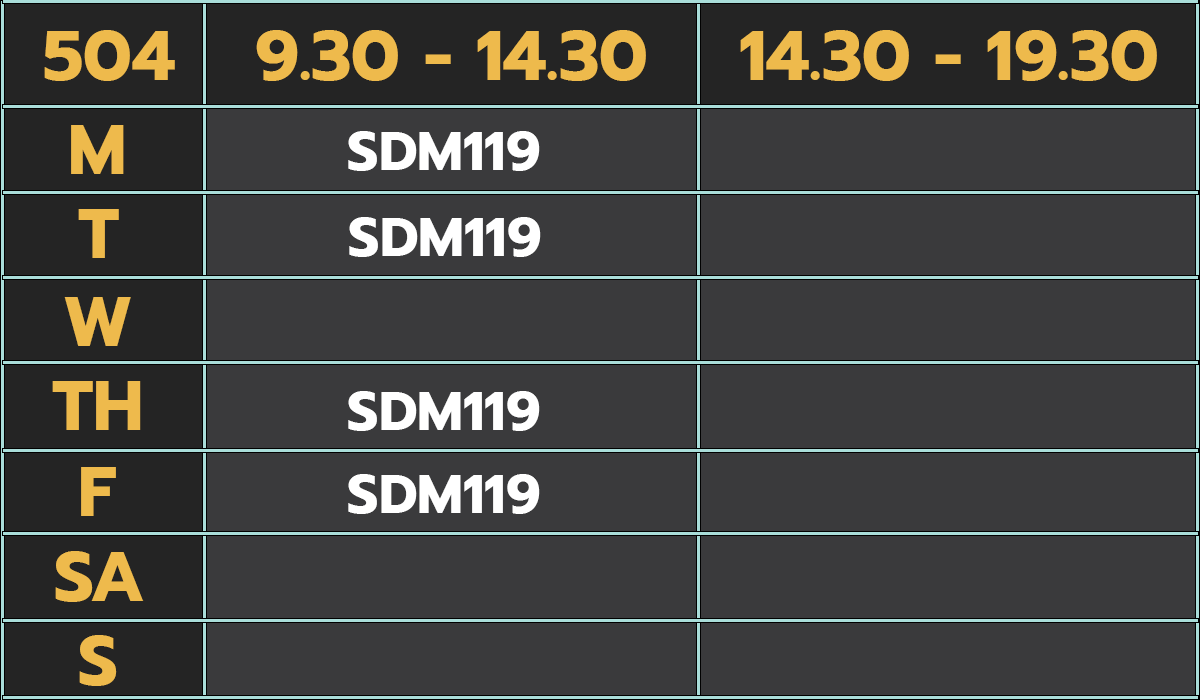
<style>
.page{position:relative;width:1200px;height:700px;background:#3a3a3c}
.page>*{position:absolute;margin:0}
.t1{font:70px "Prompt-Bold";color:#eeba4c}
.t2{font:55px "Prompt-Bold";color:#ffffff}
</style>
<div class="page">
<p class="t1" style="left:44px;top:30px;width:131px;height:51px">504</p>
<p class="t1" style="left:256px;top:30px;width:390px;height:51px">9.30 - 14.30</p>
<p class="t1" style="left:740px;top:30px;width:417px;height:51px">14.30 - 19.30</p>
<p class="t1" style="left:71px;top:125px;width:53px;height:49px">M</p>
<p class="t2" style="left:348px;top:131px;width:192px;height:40px">SDM119</p>
<p class="t1" style="left:78px;top:209px;width:41px;height:49px">T</p>
<p class="t2" style="left:349px;top:217px;width:192px;height:40px">SDM119</p>
<p class="t1" style="left:64px;top:297px;width:67px;height:49px">W</p>
<p class="t1" style="left:52px;top:381px;width:89px;height:49px">TH</p>
<p class="t2" style="left:348px;top:391px;width:192px;height:40px">SDM119</p>
<p class="t1" style="left:81px;top:467px;width:35px;height:49px">F</p>
<p class="t2" style="left:348px;top:474px;width:192px;height:40px">SDM119</p>
<p class="t1" style="left:55px;top:551px;width:89px;height:51px">SA</p>
<p class="t1" style="left:79px;top:635px;width:38px;height:51px">S</p>
</div>
